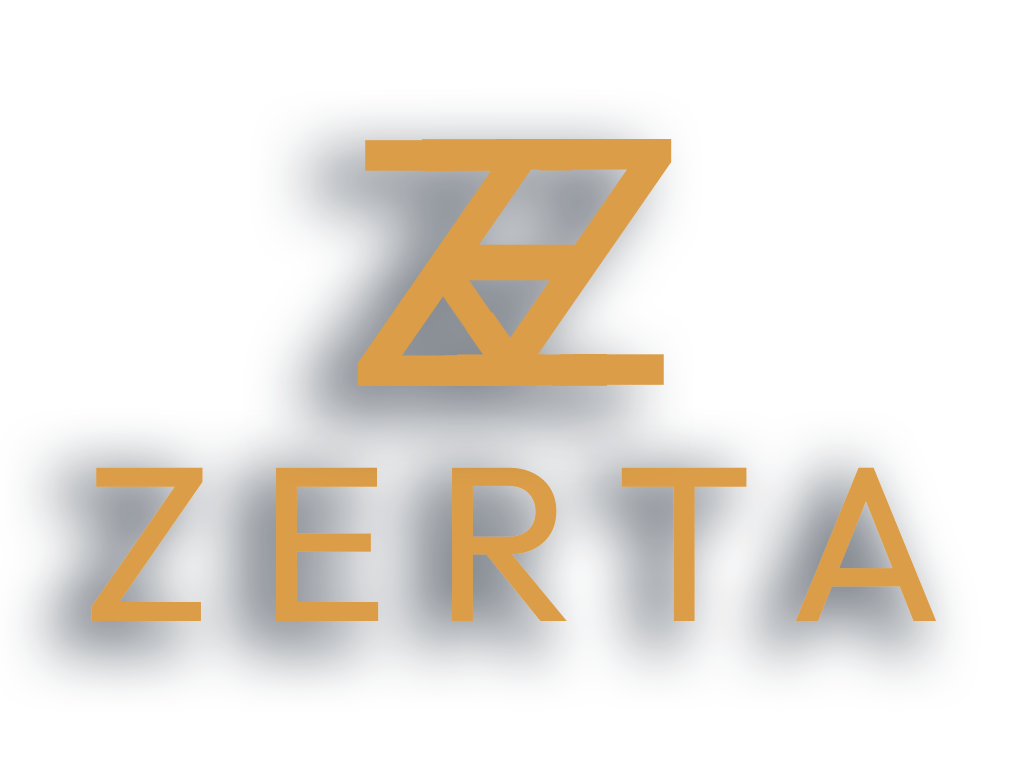
<style>
.page{position:relative;width:1028px;height:771px;background:#ffffff}
.page>*{position:absolute;margin:0}
.t1{font:220.8px "Outfit-Regular";color:#db9d47}
</style>
<div class="page">
<p class="t1" style="left:91px;top:467px;width:846px;height:154px">Z E R T A</p>
</div>
